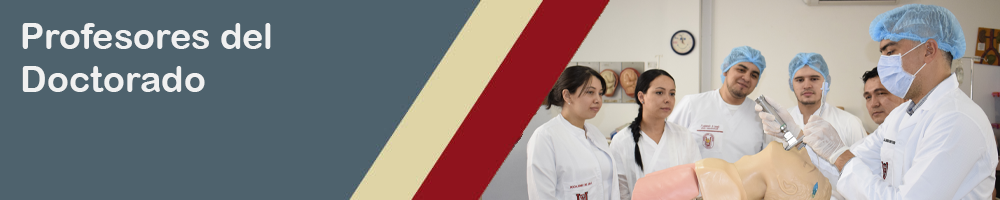
<style>
.page{position:relative;width:1000px;height:200px;background:#4e626d}
.page>*{position:absolute;margin:0}
.t1{font:36px "ArialRoundedMTBold";color:#f0f0f0}
</style>
<div class="page">
<p class="t1" style="left:22px;top:23px;width:249px;height:69px">Profesores del Doctorado</p>
</div>
